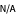
<style>
.page{position:relative;width:16px;height:16px;background:#ffffff}
.page>*{position:absolute;margin:0}
.t1{font:9.6px "Tahoma";color:#000000}
</style>
<div class="page">
<p class="t1" style="left:0px;top:4px;width:16px;height:10px">N/A</p>
</div>
